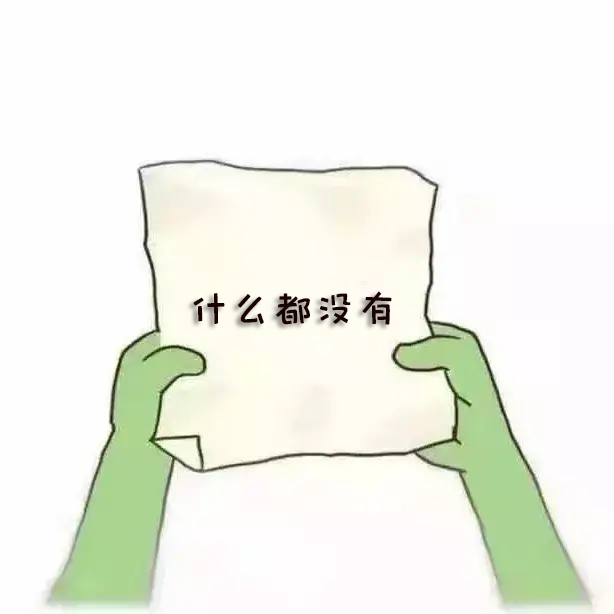
<style>
.page{position:relative;width:614px;height:614px;background:#fefefe}
.page>*{position:absolute;margin:0}
.t1{font:42px "xiaodanchunti";color:#1c0303}
</style>
<div class="page">
<p class="t1" style="left:193px;top:291px;width:199px;height:34px">什么都没有</p>
</div>
